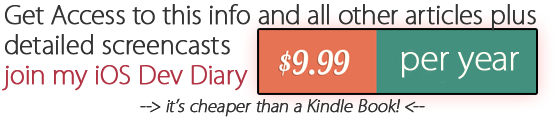
<style>
.page{position:relative;width:560px;height:120px;background:#ffffff}
.page>*{position:absolute;margin:0}
.t1{font:25px "KozGoPro-ExtraLight";color:#333333;font-weight:bold}
.t2{font:25px "KozGoPro-ExtraLight";color:#b13344;font-weight:bold}
.t3{font:33.3px "KozGoPro-ExtraLight";color:#fffef5;font-weight:bold}
.t4{font:16.7px "KozGoPro-ExtraLight";color:#333333;font-weight:bold;font-style:italic}
</style>
<div class="page">
<p class="t1" style="left:2px;top:4px;width:534px;height:87px">Get Access to this info and all other articles plus<br>detailed screencasts<br><span class="t2">join my iOS Dev Diary</span></p>
<p class="t3" style="left:401px;top:52px;width:118px;height:27px">per year</p>
<p class="t4" style="left:140px;top:98px;width:285px;height:19px">--&gt; it’s cheaper than a Kindle Book! &lt;--</p>
</div>
